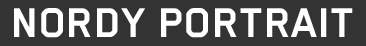
<style>
.page{position:relative;width:366px;height:46px;background:#333333}
.page>*{position:absolute;margin:0}
.t1{font:48px "BlenderPro-Bold";color:#ffffff;text-transform:uppercase}
</style>
<div class="page">
<p class="t1" style="left:14px;top:8px;width:339px;height:30px">Nordy PORTRAIT</p>
</div>
